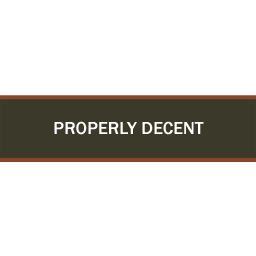
<style>
.page{position:relative;width:256px;height:256px;background:#ffffff}
.page>*{position:absolute;margin:0}
.t1{font:18.1px "FranklinGothic-Medium";color:#ffffff}
</style>
<div class="page">
<p class="t1" style="left:54px;top:121px;width:150px;height:14px">PROPERLY DECENT</p>
</div>
